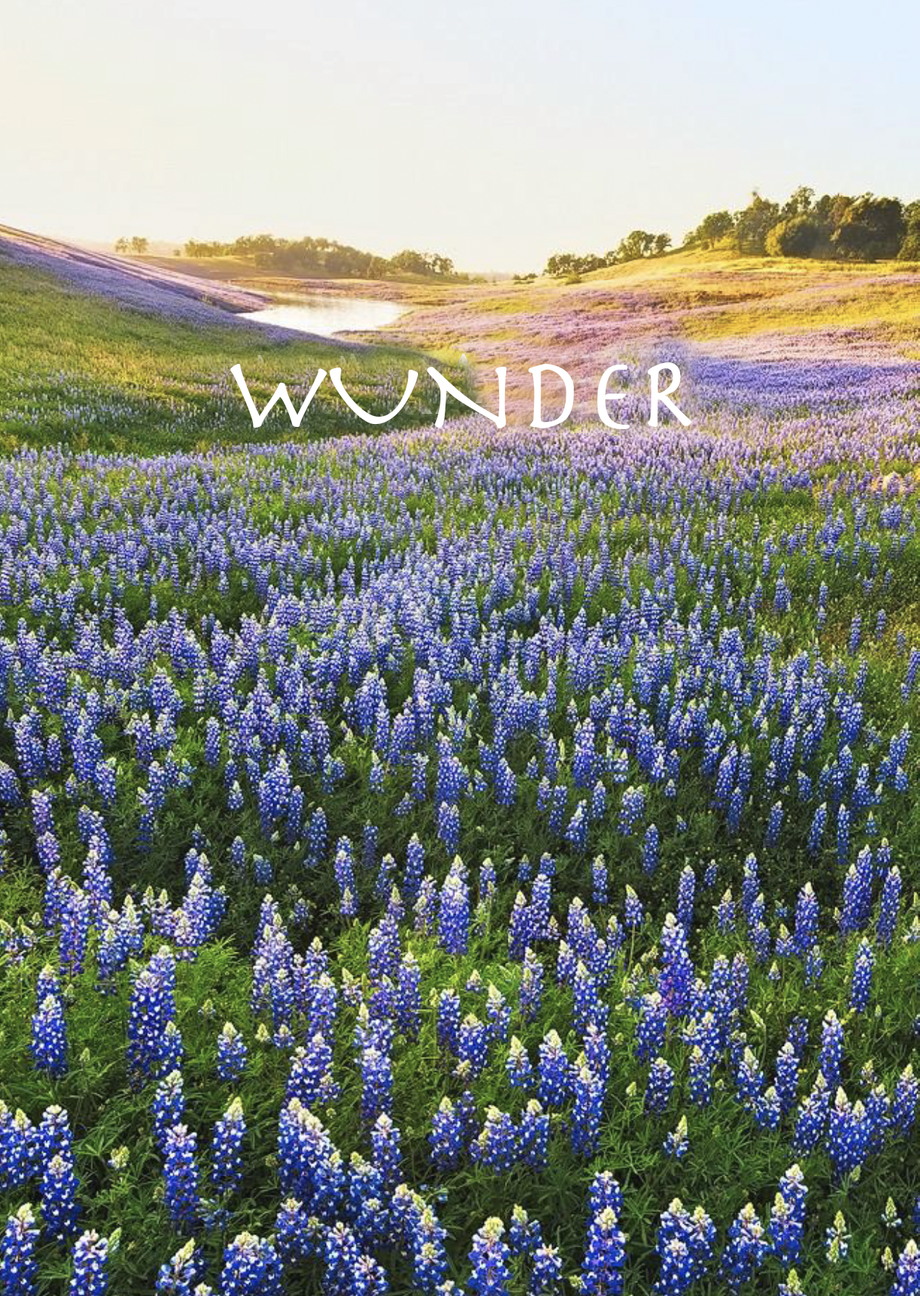
<style>
.page{position:relative;width:920px;height:1296px}
.page>*{position:absolute;margin:0}
.t1{font:104.4px "Herculanum";color:#ffffff}
</style>
<div class="page">
<p class="t1" style="left:230px;top:362px;width:462px;height:67px">WUNDER</p>
</div>
